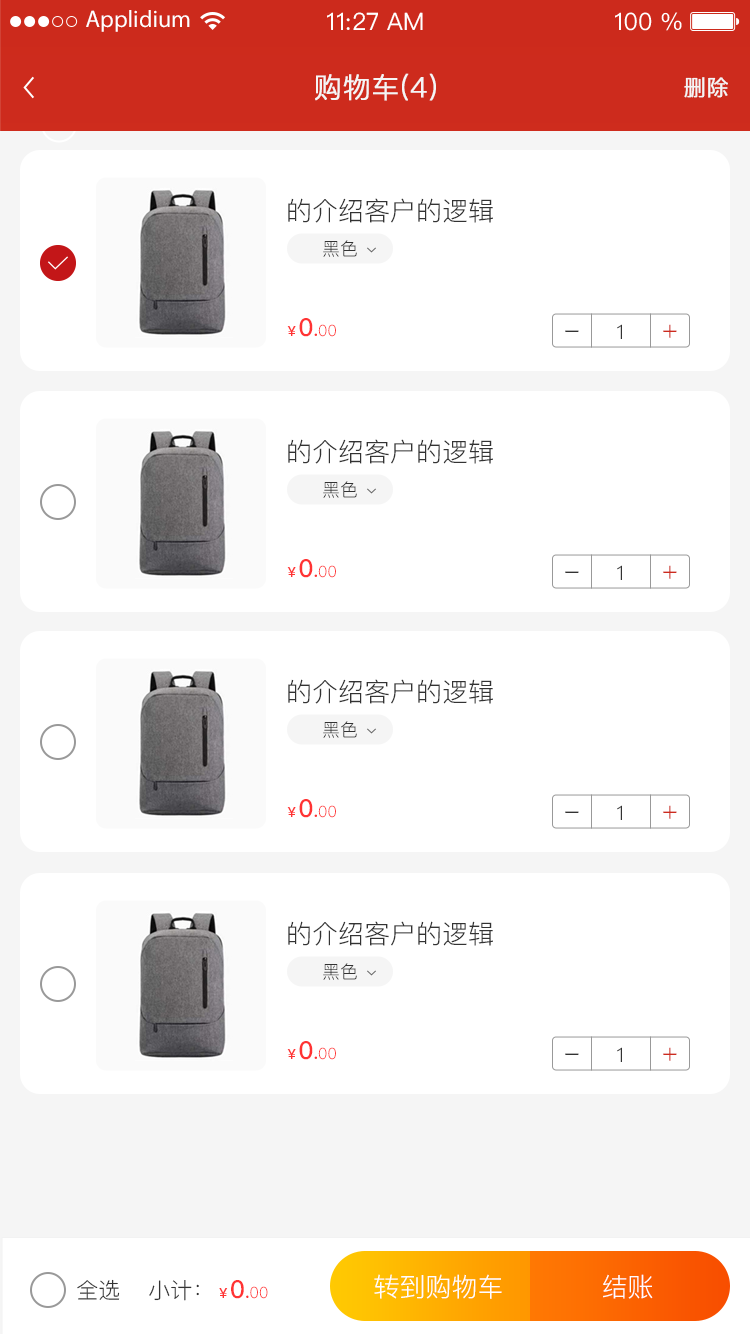
<style>
.page{position:relative;width:750px;height:1334px;background:#ffffff}
.page>*{position:absolute;margin:0}
.t1{font:24px "MyriadPro-Regular";color:#ffffff}
.t2{font:24px "PingFangSC-Regular";color:#ffffff}
.t3{font:28px "PingFang-SC-Regular";color:#f5f5f5;text-transform:uppercase;font-weight:bold}
.t4{font:22px "PingFang-SC-Regular";color:#f5f5f5;text-transform:uppercase;font-weight:bold}
.t5{font:26px "PingFang-SC-Regular";color:#333333}
.t6{font:18px "PingFang-SC-Regular";color:#333333}
.t7{font:15.5px "PingFang-SC-Regular";color:#ff3333}
.t8{font:13.9px "PingFang-SC-Bold";color:#ff3333}
.t9{font:24.8px "PingFang-SC-Bold";color:#ff3333}
.t10{font:17px "PingFang-SC-Bold";color:#ff3333}
.t11{font:20px "PingFang-SC-Regular";color:#333333}
.t12{font:26px "PingFang-SC-Regular";color:#cd2b1e}
.t13{font:26px "PingFang-SC-Regular";color:#ffffff}
.t14{font:22px "PingFang-SC-Regular";color:#333333;text-transform:uppercase}
</style>
<div class="page">
<p class="t1" style="left:86px;top:10px;width:104px;height:22px">Applidium</p>
<p class="t2" style="left:327px;top:12px;width:96px;height:18px">11:27 AM</p>
<p class="t2" style="left:615px;top:12px;width:67px;height:19px">100 %</p>
<p class="t3" style="left:315px;top:73px;width:121px;height:28px">购物车(4）</p>
<p class="t4" style="left:684px;top:77px;width:44px;height:21px">删除</p>
<p class="t5" style="left:288px;top:198px;width:205px;height:25px">的介绍客户的逻辑</p>
<p class="t6" style="left:323px;top:240px;width:34px;height:17px">黑色</p>
<p class="t7" style="left:287px;top:318px;width:49px;height:19px"><span class="t8">￥</span><span class="t9">0</span><span class="t10">.</span>00</p>
<p class="t11" style="left:617px;top:324px;width:5px;height:15px">1</p>
<p class="t12" style="left:663px;top:324px;width:14px;height:14px">+</p>
<p class="t5" style="left:565px;top:330px;width:14px;height:2px">-</p>
<p class="t5" style="left:288px;top:439px;width:205px;height:25px">的介绍客户的逻辑</p>
<p class="t6" style="left:323px;top:481px;width:34px;height:17px">黑色</p>
<p class="t7" style="left:287px;top:559px;width:49px;height:19px"><span class="t8">￥</span><span class="t9">0</span><span class="t10">.</span>00</p>
<p class="t11" style="left:617px;top:565px;width:5px;height:15px">1</p>
<p class="t12" style="left:663px;top:565px;width:14px;height:14px">+</p>
<p class="t5" style="left:565px;top:571px;width:14px;height:2px">-</p>
<p class="t5" style="left:288px;top:679px;width:205px;height:25px">的介绍客户的逻辑</p>
<p class="t6" style="left:323px;top:721px;width:34px;height:17px">黑色</p>
<p class="t7" style="left:287px;top:799px;width:49px;height:19px"><span class="t8">￥</span><span class="t9">0</span><span class="t10">.</span>00</p>
<p class="t11" style="left:617px;top:805px;width:5px;height:15px">1</p>
<p class="t12" style="left:663px;top:805px;width:14px;height:14px">+</p>
<p class="t5" style="left:565px;top:811px;width:14px;height:2px">-</p>
<p class="t5" style="left:288px;top:921px;width:205px;height:25px">的介绍客户的逻辑</p>
<p class="t6" style="left:323px;top:963px;width:34px;height:17px">黑色</p>
<p class="t7" style="left:287px;top:1041px;width:49px;height:19px"><span class="t8">￥</span><span class="t9">0</span><span class="t10">.</span>00</p>
<p class="t11" style="left:617px;top:1047px;width:5px;height:15px">1</p>
<p class="t12" style="left:663px;top:1047px;width:14px;height:14px">+</p>
<p class="t5" style="left:565px;top:1053px;width:14px;height:2px">-</p>
<p class="t13" style="left:374px;top:1274px;width:128px;height:25px">转到购物车</p>
<p class="t13" style="left:603px;top:1274px;width:50px;height:25px">结账</p>
<p class="t14" style="left:77px;top:1279px;width:43px;height:21px">全选</p>
<p class="t14" style="left:149px;top:1280px;width:50px;height:21px">小计：</p>
<p class="t7" style="left:219px;top:1280px;width:49px;height:19px"><span class="t8">￥</span><span class="t9">0</span><span class="t10">.</span>00</p>
</div>
